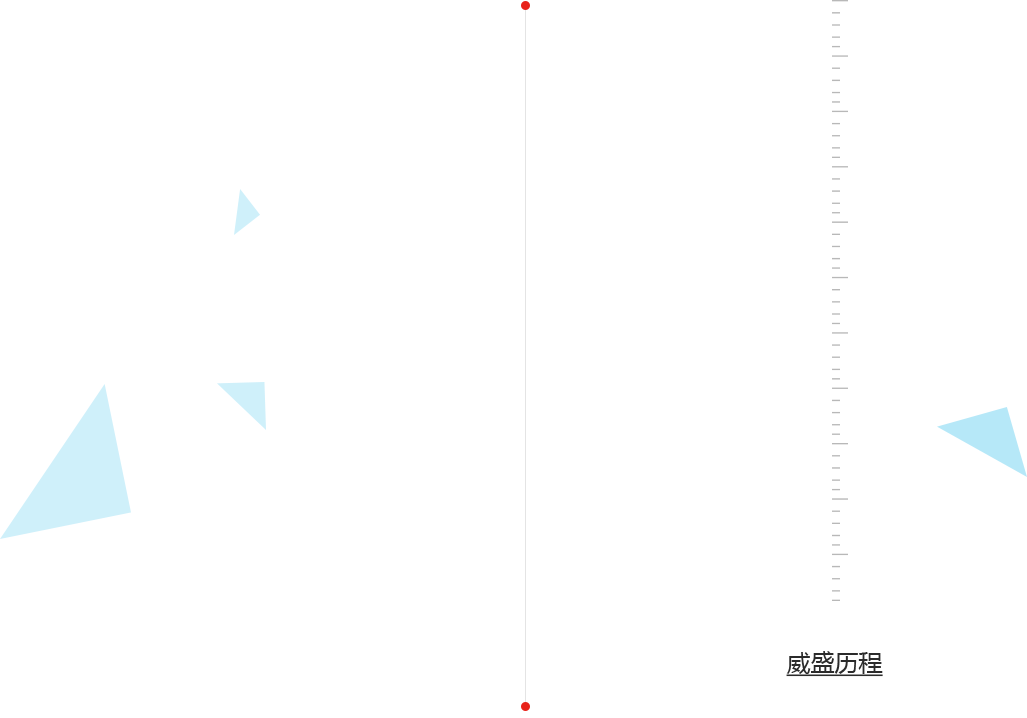
<style>
.page{position:relative;width:1027px;height:718px;background:#ffffff}
.page>*{position:absolute;margin:0}
.t1{font:24px "MicrosoftYaHei";color:#2b2b2b;font-variant:small-caps;text-decoration:underline}
</style>
<div class="page">
<p class="t1" style="left:786px;top:651px;width:97px;height:26px">威盛历程</p>
</div>
